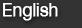
<style>
.page{position:relative;width:82px;height:28px;background:#333333}
.page>*{position:absolute;margin:0}
.t1{font:18px "HelveticaNeueLT-Extended";color:#ffffff;font-weight:bold;scale:0.8 1}
</style>
<div class="page">
<p class="t1" style="left:3px;top:3px;width:55px;height:18px">English</p>
</div>
